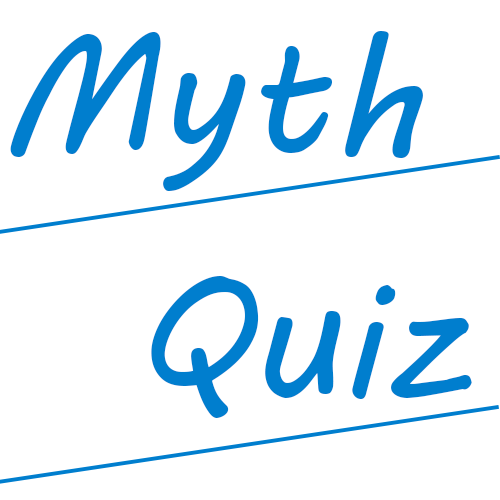
<style>
.page{position:relative;width:500px;height:500px;background:#ffffff}
.page>*{position:absolute;margin:0}
.t1{font:166.7px "MVBoli";color:#007ece}
</style>
<div class="page">
<p class="t1" style="left:10px;top:31px;width:413px;height:160px">Myth</p>
<p class="t1" style="left:151px;top:276px;width:321px;height:142px">Quiz</p>
</div>
